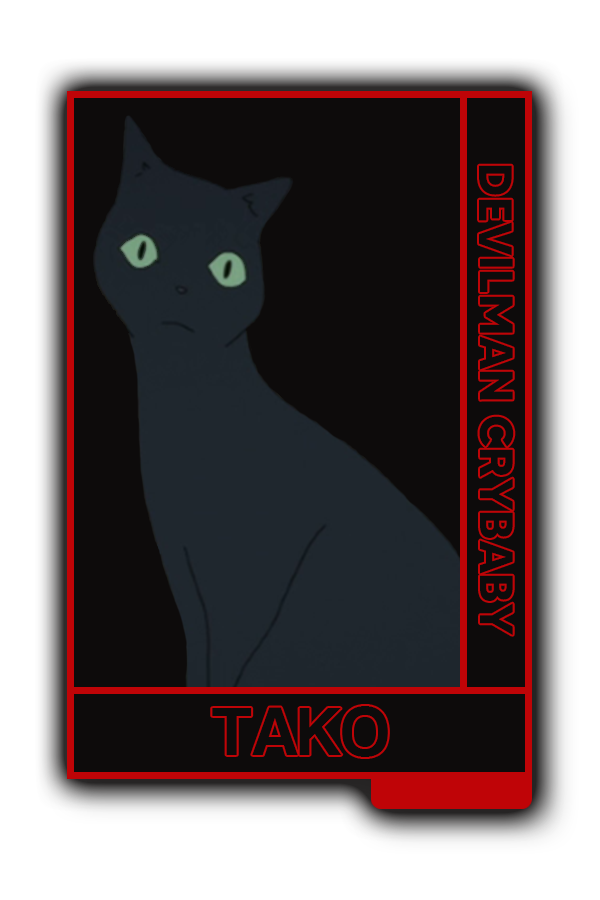
<style>
.page{position:relative;width:600px;height:900px;background:#0d0b0b}
.page>*{position:absolute;margin:0}
.t1{font:46.8px "MADETOMMY-Bold";color:#0d0b0b}
.t2{font:71.5px "CoolveticaRg-Regular";color:#0d0b0b}
</style>
<div class="page">
<p class="t1" style="left:479px;top:165px;width:35px;height:470px;rotate:90deg">DEVILMAN CRYBABY</p>
<p class="t2" style="left:212px;top:706px;width:176px;height:51px">TAKO</p>
</div>
